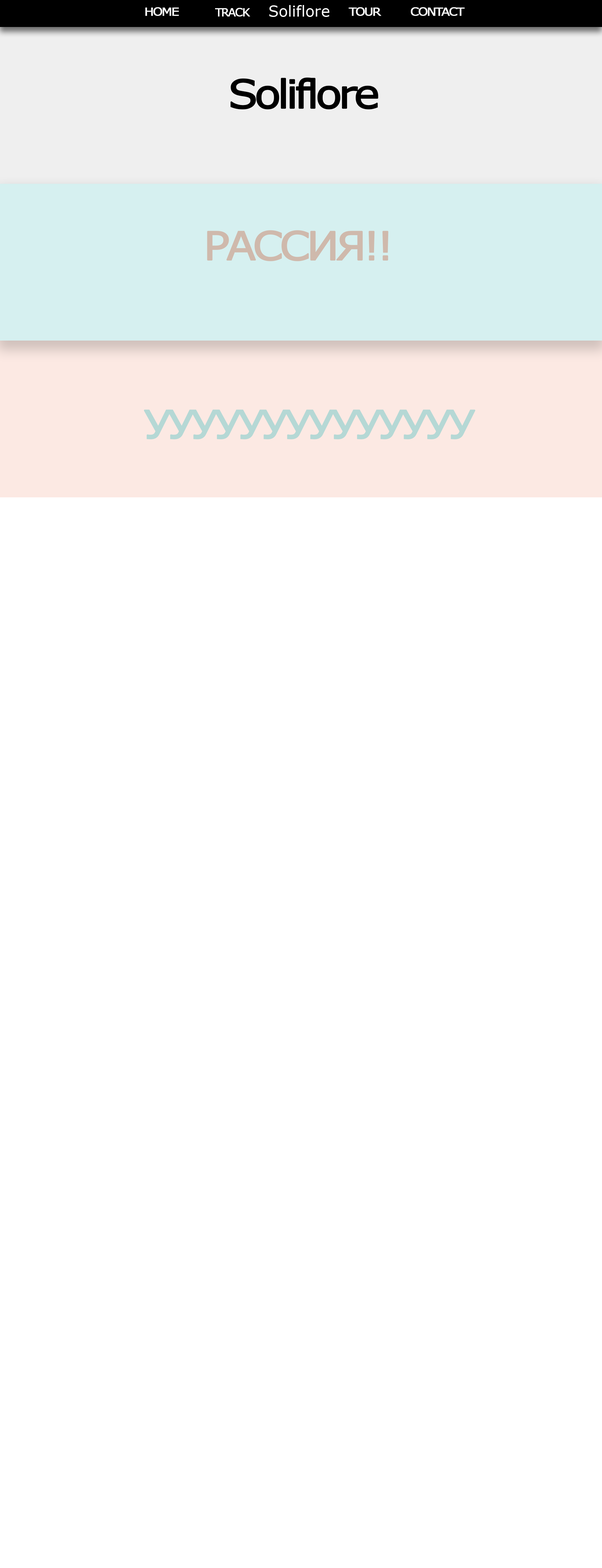
<style>
.page{position:relative;width:602px;height:1568px;background:#ffffff}
.page>*{position:absolute;margin:0}
.t1{font:11.3px "Verdana";letter-spacing:-0.1em;color:#ffffff;font-weight:bold;scale:1.1 1}
.t2{font:11.3px "Verdana";letter-spacing:-0.1em;color:#ffffff;font-weight:bold}
.t3{font:39.2px "Verdana";letter-spacing:-0.1em;color:#000000;font-weight:bold;scale:1.1 1}
.t4{font:39.2px "Verdana";letter-spacing:-0.1em;color:#cfb9ac;font-weight:bold;scale:1.1 1}
.t5{font:39.2px "Verdana";letter-spacing:-0.1em;color:#b5d8d5;font-weight:bold;scale:1.1 1}
</style>
<div class="page">
<p class="t1" style="left:145px;top:7px;width:34px;height:9px">HOME</p>
<p class="t2" style="left:215px;top:8px;width:35px;height:9px">TRACK</p>
<p class="t1" style="left:349px;top:7px;width:32px;height:9px">TOUR</p>
<p class="t1" style="left:411px;top:7px;width:54px;height:9px">CONTACT</p>
<p class="t3" style="left:230px;top:77px;width:149px;height:32px">Soliflore</p>
<p class="t4" style="left:207px;top:230px;width:182px;height:31px">РАССИЯ!!</p>
<p class="t5" style="left:144px;top:410px;width:332px;height:29px">УУУУУУУУУУУУУУ</p>
</div>
